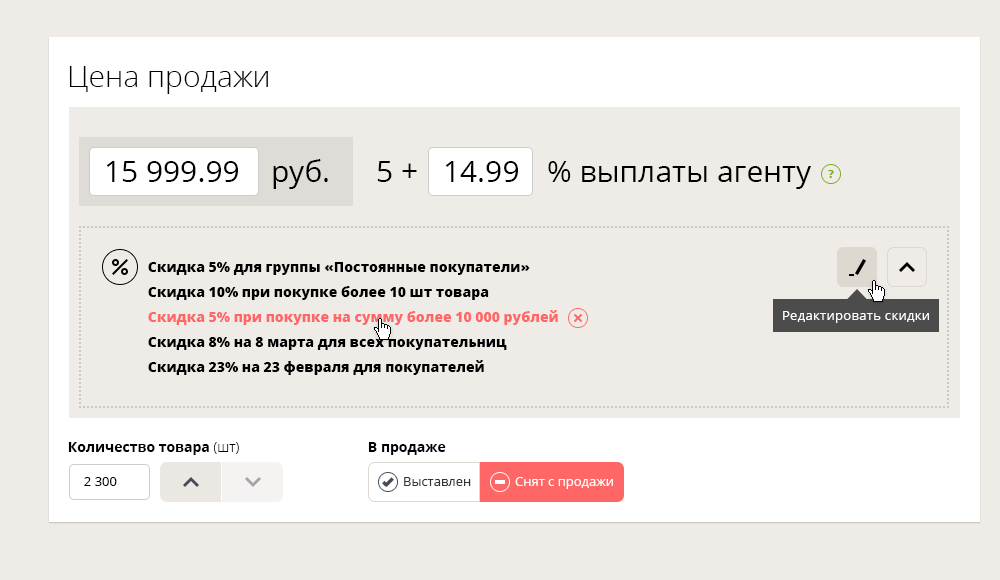
<style>
.page{position:relative;width:1000px;height:580px;background:#efece7}
.page>*{position:absolute;margin:0}
.t1{font:30px "OpenSans-Light";color:#000000}
.t2{font:30px "OpenSans";color:#000000}
.t3{font:11px "OpenSans-Extrabold";color:#7caa1f}
.t4{font:14px/25px "OpenSans-Extrabold";color:#000000}
.t5{font:14px/25px "OpenSans-Extrabold";color:#ff6766}
.t6{font:13px "OpenSans";letter-spacing:0.025em;color:#ffffff}
.t7{font:14px "OpenSans-Bold";color:#000000}
.t8{font:14px "OpenSans-Light";color:#000000}
.t9{font:13px "OpenSans";color:#000000}
.t10{font:13px "OpenSans";color:#333333}
.t11{font:13px "OpenSans";color:#ffffff}
</style>
<div class="page">
<p class="t1" style="left:69px;top:66px;width:199px;height:28px">Цена продажи</p>
<p class="t2" style="left:106px;top:161px;width:132px;height:21px">15 999.99</p>
<p class="t2" style="left:273px;top:159px;width:55px;height:30px">руб.</p>
<p class="t2" style="left:377px;top:161px;width:40px;height:21px">5 +</p>
<p class="t2" style="left:445px;top:161px;width:73px;height:21px">14.99</p>
<p class="t2" style="left:548px;top:161px;width:263px;height:28px">% выплаты агенту</p>
<p class="t3" style="left:828px;top:170px;width:6px;height:8px">?</p>
<p class="t4" style="left:148px;top:262px;width:410px;height:113px">Скидка 5% для группы «Постоянные покупатели»<br>Скидка 10% при покупке более 10 шт товара<br><span class="t5">Скидка 5% при покупке на сумму более 10 000 рублей<br></span>Скидка 8% на 8 марта для всех покупательниц<br>Скидка 23% на 23 февраля для покупателей</p>
<p class="t6" style="left:783px;top:311px;width:146px;height:12px">Редактировать скидки</p>
<p class="t7" style="left:68px;top:442px;width:171px;height:13px">Количество товара <span class="t8">(шт)</span></p>
<p class="t7" style="left:368px;top:442px;width:78px;height:13px">В продаже</p>
<p class="t9" style="left:84px;top:477px;width:33px;height:9px">2 300</p>
<p class="t10" style="left:404px;top:477px;width:67px;height:9px">Выставлен</p>
<p class="t11" style="left:515px;top:477px;width:98px;height:12px">Снят с продажи</p>
</div>
